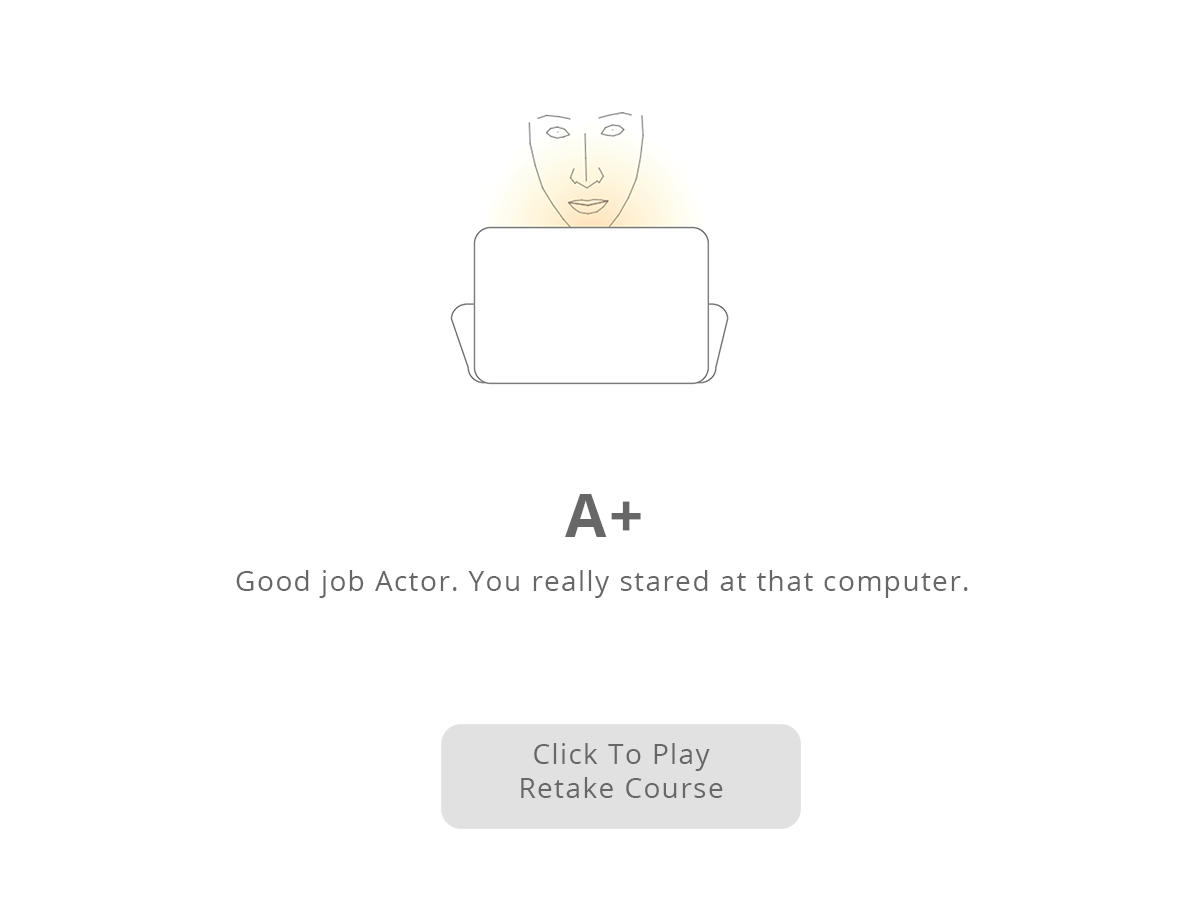
<style>
.page{position:relative;width:1200px;height:900px;background:#ffffff}
.page>*{position:absolute;margin:0}
.t1{font:60px "OpenSans-Bold";letter-spacing:0.05em;color:#676767}
.t2{font:28px "OpenSans";letter-spacing:0.05em;color:#676767}
</style>
<div class="page">
<p class="t1" style="left:565px;top:494px;width:76px;height:43px">A+</p>
<p class="t2" style="left:236px;top:570px;width:732px;height:28px">Good job Actor. You really stared at that computer.</p>
<p class="t2" style="left:521px;top:743px;width:202px;height:55px;text-align:center">Click To Play Retake Course</p>
</div>
